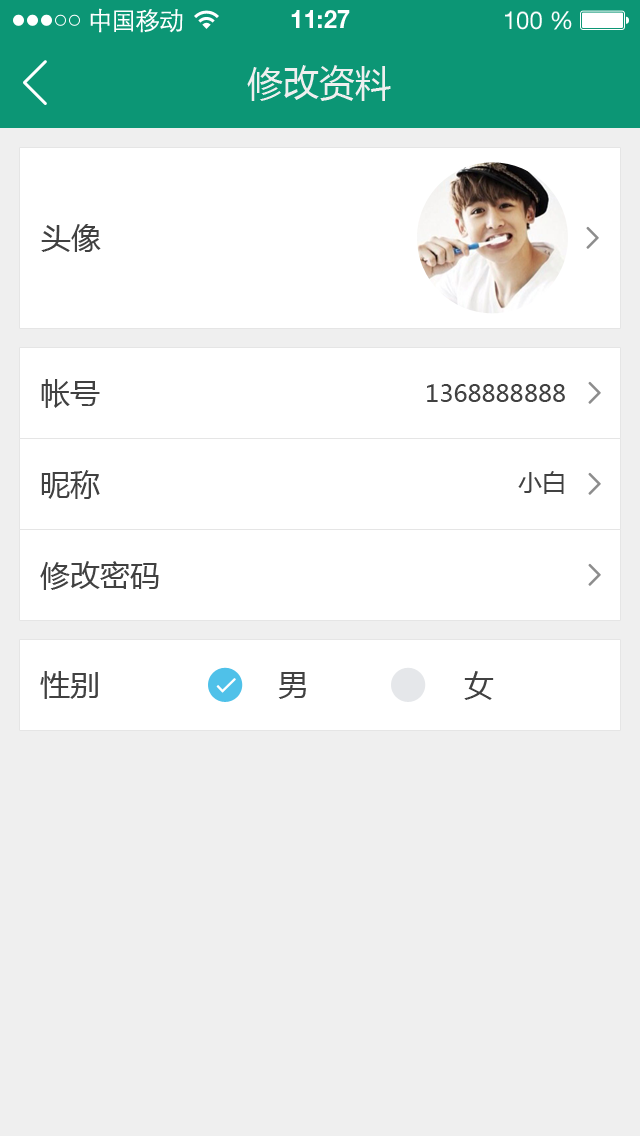
<style>
.page{position:relative;width:640px;height:1136px;background:#efefef}
.page>*{position:absolute;margin:0}
.t1{font:25px "STXihei";letter-spacing:-0.045em;color:#fefefe}
.t2{font:24.6px "HelveticaNeueLTPro-Bd";color:#ffffff}
.t3{font:24.6px "HelveticaNeueLTStd-Roman";color:#ffffff}
.t4{font:36px "MicrosoftYaHei";color:#efefef}
.t5{font:30px "MicrosoftYaHei";color:#414141}
.t6{font:24px "MicrosoftYaHei";color:#414141}
</style>
<div class="page">
<p class="t1" style="left:90px;top:8px;width:93px;height:25px">中国移动</p>
<p class="t2" style="left:291px;top:10px;width:59px;height:18px">11:27</p>
<p class="t3" style="left:505px;top:11px;width:67px;height:19px">100 %</p>
<p class="t4" style="left:247px;top:65px;width:144px;height:36px">修改资料</p>
<p class="t5" style="left:41px;top:224px;width:60px;height:28px">头像</p>
<p class="t5" style="left:41px;top:379px;width:59px;height:29px">帐号</p>
<p class="t6" style="left:427px;top:384px;width:138px;height:18px">1368888888</p>
<p class="t5" style="left:41px;top:470px;width:59px;height:29px">昵称</p>
<p class="t6" style="left:518px;top:471px;width:46px;height:23px">小白</p>
<p class="t5" style="left:40px;top:561px;width:119px;height:29px">修改密码</p>
<p class="t5" style="left:40px;top:671px;width:58px;height:28px">性别</p>
<p class="t5" style="left:278px;top:672px;width:28px;height:27px">男</p>
<p class="t5" style="left:464px;top:671px;width:30px;height:29px">女</p>
</div>
